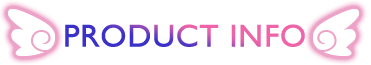
<style>
.page{position:relative;width:371px;height:65px;background:#ffffff}
.page>*{position:absolute;margin:0}
.t1{font:32px "GillSansMT";font-weight:bold}
</style>
<div class="page">
<p class="t1" style="left:65px;top:24px;width:240px;height:23px">PRODUCT INFO</p>
</div>
